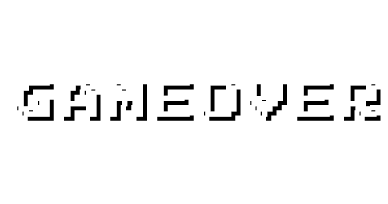
<style>
.page{position:relative;width:388px;height:204px;background:#ffffff}
.page>*{position:absolute;margin:0}
.t1{font:41.7px "Emulogic";letter-spacing:0.12em;color:#ffffff}
.t2{font:41.7px "Emulogic";letter-spacing:0.12em}
</style>
<div class="page">
<p class="t1" style="left:13px;top:80px;width:364px;height:37px">GameOVer</p>
<p class="t2" style="left:17px;top:84px;width:364px;height:37px">GameOVer</p>
</div>
